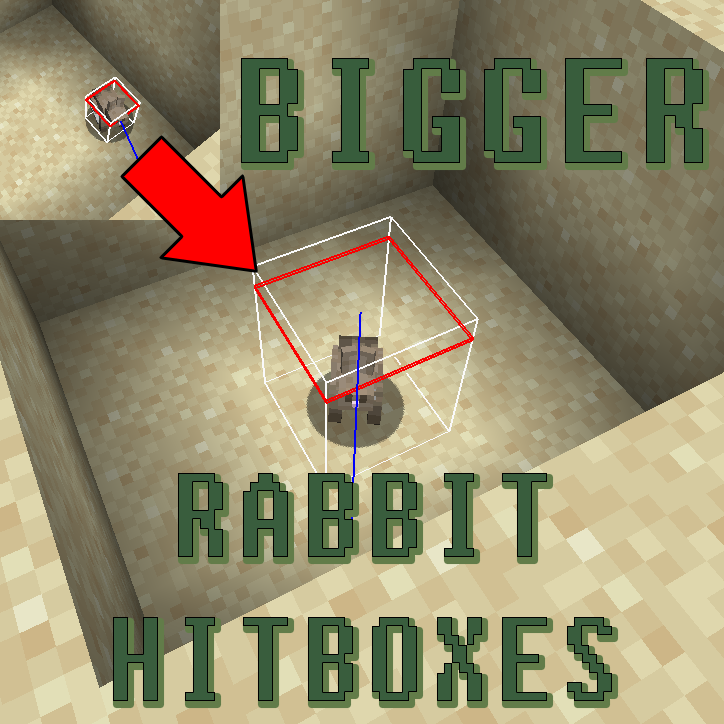
<style>
.page{position:relative;width:724px;height:724px}
.page>*{position:absolute;margin:0}
.t1{font:150px "Fixedsys";letter-spacing:0.05em;color:#385d3c;scale:0.8 1}
.t2{font:120px "Fixedsys";letter-spacing:0.05em;color:#395d3d;scale:0.8 1}
</style>
<div class="page">
<p class="t1" style="left:241px;top:58px;width:462px;height:105px">BIGGER</p>
<p class="t2" style="left:113px;top:473px;width:499px;height:228px;text-align:center">RABBIT <br>HITBOXES</p>
</div>
